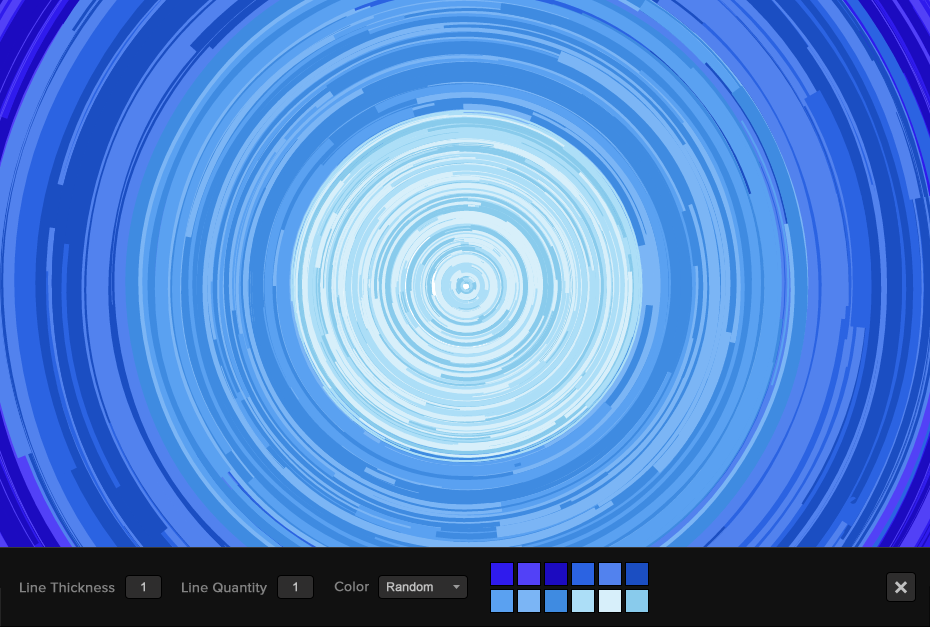
<style>
.page{position:relative;width:930px;height:627px}
.page>*{position:absolute;margin:0}
.t1{font:14px "ProximaNova-Regular";color:#838383;font-weight:bold}
.t2{font:12px "ArialMT";color:#c0c0c0;font-weight:bold}
</style>
<div class="page">
<p class="t1" style="left:20px;top:582px;width:95px;height:11px">Line Thickness</p>
<p class="t2" style="left:141px;top:582px;width:4px;height:10px">1</p>
<p class="t1" style="left:182px;top:582px;width:85px;height:13px">Line Quantity</p>
<p class="t2" style="left:293px;top:582px;width:4px;height:10px">1</p>
<p class="t1" style="left:334px;top:581px;width:35px;height:11px">Color</p>
<p class="t2" style="left:387px;top:582px;width:46px;height:10px">Random</p>
</div>
